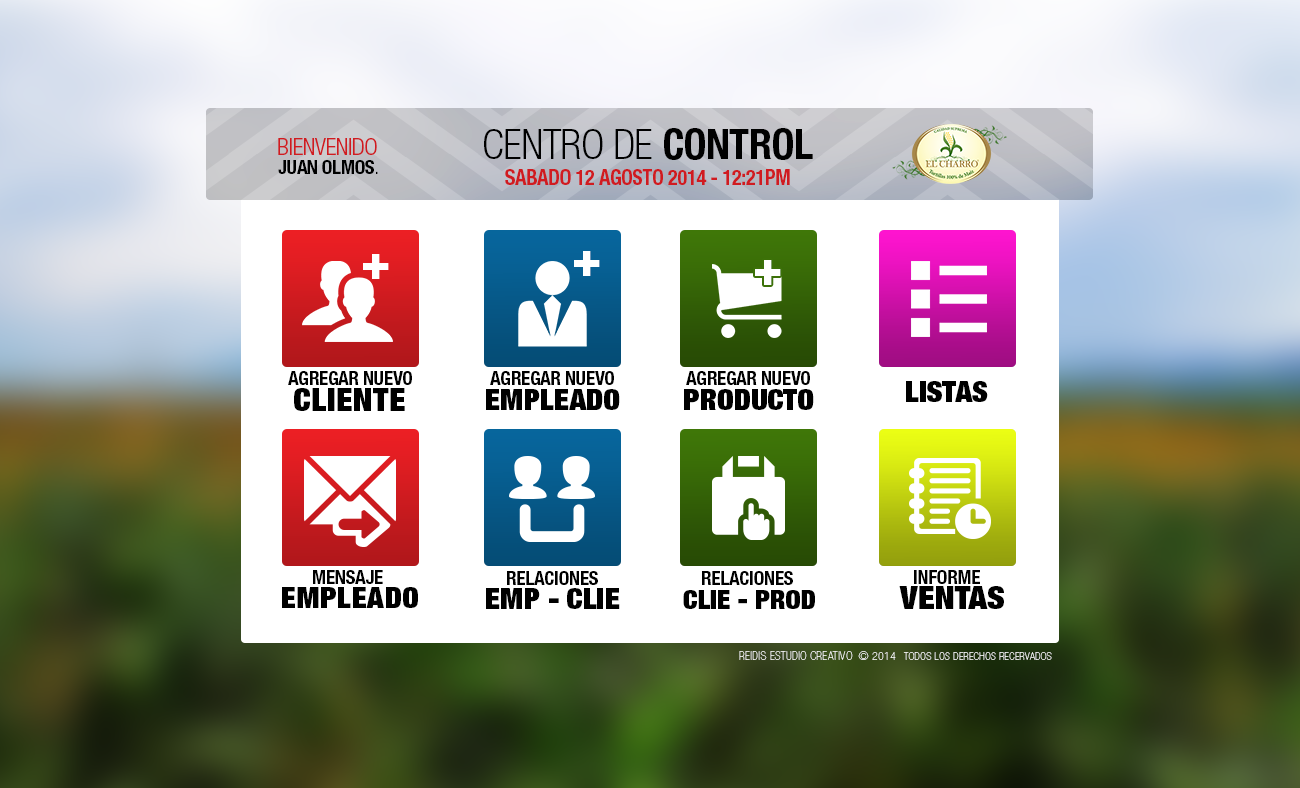
<style>
.page{position:relative;width:1300px;height:788px;background:#ffffff}
.page>*{position:absolute;margin:0}
.t1{font:24.9px "HelveticaNeue-LightCond";letter-spacing:-0.02em;color:#000000;text-transform:uppercase}
.t2{font:24.9px "HelveticaNeue-BoldCond";letter-spacing:-0.02em;color:#000000;text-transform:uppercase}
.t3{font:13.6px "HelveticaNeue-LightCond";letter-spacing:-0.02em;color:#d01b20;text-transform:uppercase;scale:1.06 1}
.t4{font:11.1px "HelveticaNeue-BoldCond";letter-spacing:-0.02em;color:#000000;text-transform:uppercase;scale:1.04 1}
.t5{font:11.1px "HelveticaNeue-LightCond";letter-spacing:-0.02em;color:#000000;text-transform:uppercase;scale:1.04 1}
.t6{font:12.9px "HelveticaNeue-BoldCond";letter-spacing:-0.02em;color:#d01b20;text-transform:uppercase;scale:0.96 1}
.t7{font:29.6px "HelveticaNeue-ExtBlackCond";letter-spacing:-0.02em;color:#ffffff;text-transform:uppercase}
.t8{font:18.9px "HelveticaNeue-ExtBlackCond";letter-spacing:0.02em;color:#000000;text-transform:uppercase;scale:1.03 1}
.t9{font:17.6px "HelveticaNeue-ExtBlackCond";color:#000000;text-transform:uppercase}
.t10{font:17px "HelveticaNeue-ExtBlackCond";letter-spacing:0.02em;color:#000000;text-transform:uppercase;scale:1.04 1}
.t11{font:15.9px "HelveticaNeue-ExtBlackCond";color:#000000;text-transform:uppercase}
.t12{font:19.2px "HelveticaNeue-ExtBlackCond";color:#000000;text-transform:uppercase;scale:1.04 1}
.t13{font:6.9px "HelveticaNeue-UltraLigCond";letter-spacing:0.04em;color:#ffffff;text-transform:uppercase}
.t14{font:6.3px "HelveticaNeue-UltraLigCond";letter-spacing:0.04em;color:#ffffff;text-transform:uppercase}
</style>
<div class="page">
<p class="t1" style="left:484px;top:128px;width:329px;height:32px">centro de <span class="t2">control</span></p>
<p class="t3" style="left:278px;top:138px;width:99px;height:17px">Bienvenido</p>
<p class="t4" style="left:278px;top:160px;width:100px;height:14px">juan Olmos<span class="t5">.</span></p>
<p class="t6" style="left:505px;top:169px;width:285px;height:16px">Sabado 12 agosto 2014 - 12:21pm</p>
<p class="t7" style="left:363px;top:254px;width:26px;height:25px">+</p>
<p class="t7" style="left:574px;top:251px;width:26px;height:25px">+</p>
<p class="t7" style="left:755px;top:260px;width:26px;height:25px">+</p>
<p class="t4" style="left:288px;top:371px;width:124px;height:14px">Agregar nuevo</p>
<p class="t4" style="left:490px;top:371px;width:124px;height:14px">Agregar nuevo</p>
<p class="t4" style="left:686px;top:371px;width:124px;height:14px">Agregar nuevo</p>
<p class="t8" style="left:294px;top:388px;width:111px;height:23px">Cliente</p>
<p class="t9" style="left:486px;top:389px;width:134px;height:21px">empleado</p>
<p class="t9" style="left:684px;top:389px;width:130px;height:21px">producto</p>
<p class="t9" style="left:906px;top:381px;width:82px;height:21px">listas</p>
<p class="t4" style="left:313px;top:570px;width:70px;height:14px">MEnsaje</p>
<p class="t4" style="left:507px;top:571px;width:91px;height:14px">Relaciones</p>
<p class="t4" style="left:702px;top:571px;width:91px;height:14px">relaciones</p>
<p class="t4" style="left:914px;top:570px;width:66px;height:14px">informe</p>
<p class="t10" style="left:282px;top:587px;width:136px;height:21px">empleado</p>
<p class="t9" style="left:486px;top:588px;width:134px;height:21px">emp - Clie</p>
<p class="t11" style="left:683px;top:590px;width:132px;height:19px">clie - prod</p>
<p class="t12" style="left:899px;top:586px;width:105px;height:23px">ventas</p>
<p class="t13" style="left:739px;top:651px;width:157px;height:9px">Reidis Estudio Creativo  © 2014</p>
<p class="t14" style="left:903px;top:652px;width:149px;height:8px">todos los derechos recervados</p>
</div>
